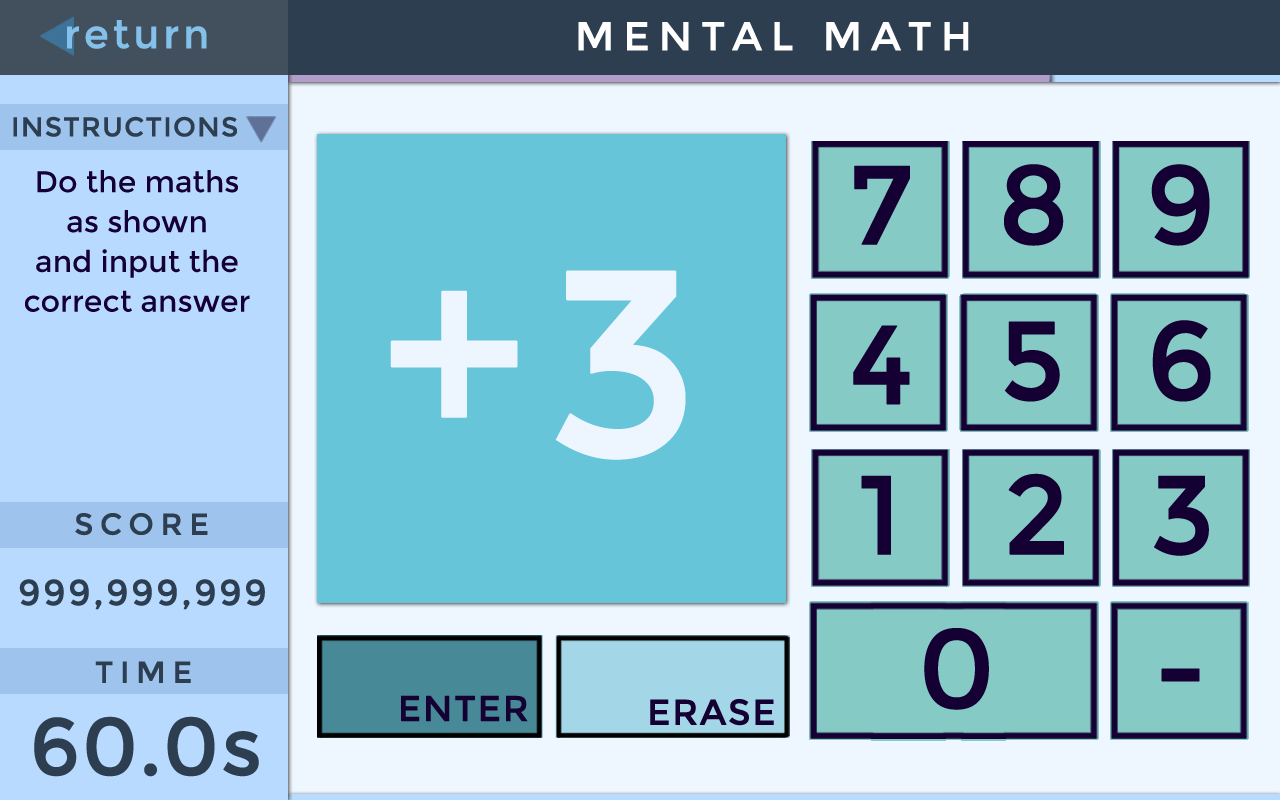
<style>
.page{position:relative;width:1280px;height:800px}
.page>*{position:absolute;margin:0}
.t1{font:40px "Montserrat-Regular";letter-spacing:0.075em;color:#83c1eb;font-weight:bold}
.t2{font:40px "Montserrat-Regular";letter-spacing:0.2em;color:#ffffff;text-transform:uppercase;font-weight:bold}
.t3{font:27px "Montserrat-Regular";letter-spacing:0.025em;color:#2d3e50;text-transform:uppercase;font-weight:bold}
.t4{font:30px/39.9px "Montserrat-Regular";color:#150033}
.t5{font:111.5px "Montserrat-Regular";letter-spacing:0.2em;color:#150033;text-transform:uppercase;font-weight:bold}
.t6{font:264.2px "Montserrat-Regular";letter-spacing:0.05em;color:#edf6ff;font-weight:bold}
.t7{font:30px "Montserrat-Regular";letter-spacing:0.2em;color:#2d3e50;font-weight:bold}
.t8{font:36px "Montserrat-Regular";letter-spacing:0.05em;color:#2d3e50;font-weight:bold}
.t9{font:35.5px "Montserrat-Regular";letter-spacing:0.025em;color:#150033;text-transform:uppercase;font-weight:bold}
.t10{font:81px "Montserrat-Regular";color:#2d3e50;text-transform:uppercase;font-weight:bold}
.t11{font:81px "Montserrat-Regular";color:#2d3e50;font-weight:bold}
</style>
<div class="page">
<p class="t1" style="left:67px;top:20px;width:140px;height:29px">return</p>
<p class="t2" style="left:578px;top:22px;width:391px;height:29px">Mental Math</p>
<p class="t3" style="left:13px;top:116px;width:224px;height:21px">Instructions</p>
<p class="t4" style="left:25px;top:170px;width:225px;height:142px;text-align:center">Do the maths <br>as shown <br>and input the <br>correct answer</p>
<p class="t5" style="left:854px;top:165px;width:56px;height:80px">7</p>
<p class="t5" style="left:1004px;top:164px;width:60px;height:82px">8</p>
<p class="t5" style="left:1151px;top:164px;width:59px;height:82px">9</p>
<p class="t6" style="left:390px;top:270px;width:296px;height:190px">+3</p>
<p class="t5" style="left:853px;top:325px;width:57px;height:80px">4</p>
<p class="t5" style="left:1004px;top:321px;width:56px;height:81px">5</p>
<p class="t5" style="left:1152px;top:320px;width:59px;height:82px">6</p>
<p class="t5" style="left:1008px;top:473px;width:56px;height:82px">2</p>
<p class="t5" style="left:861px;top:475px;width:30px;height:80px">1</p>
<p class="t5" style="left:1154px;top:475px;width:55px;height:81px">3</p>
<p class="t7" style="left:75px;top:513px;width:133px;height:23px">SCORE</p>
<p class="t8" style="left:19px;top:579px;width:246px;height:31px">999,999,999</p>
<p class="t5" style="left:924px;top:628px;width:65px;height:82px">0</p>
<p class="t7" style="left:95px;top:661px;width:96px;height:22px">TIME</p>
<p class="t5" style="left:1161px;top:668px;width:39px;height:14px">-</p>
<p class="t9" style="left:401px;top:695px;width:127px;height:27px">enter</p>
<p class="t9" style="left:650px;top:699px;width:124px;height:27px">erase</p>
<p class="t10" style="left:34px;top:716px;width:225px;height:61px">60.0<span class="t11">s</span></p>
</div>
